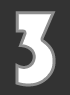
<style>
.page{position:relative;width:70px;height:95px;background:#333333}
.page>*{position:absolute;margin:0}
.t1{font:110px "Bauhaus93";letter-spacing:0.2em;color:#ffffff}
</style>
<div class="page">
<p class="t1" style="left:15px;top:11px;width:41px;height:76px">3</p>
</div>
